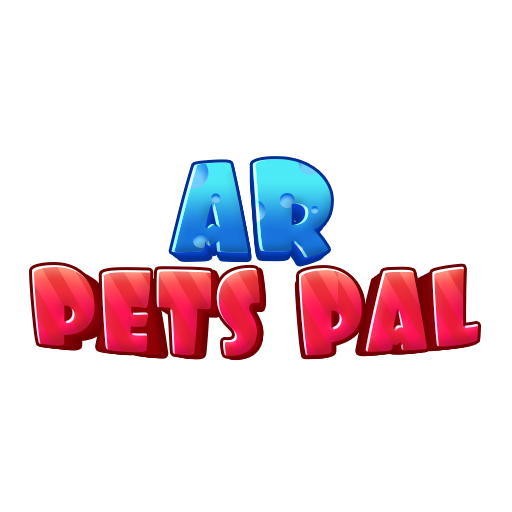
<style>
.page{position:relative;width:512px;height:512px;background:#ffffff}
.page>*{position:absolute;margin:0}
.t1{font:125px "Foo-Regular";letter-spacing:-0.01em}
.t2{font:122.5px "Foo-Regular";letter-spacing:-0.01em}
.t3{font:120.1px "Foo-Regular";letter-spacing:-0.01em}
.t4{font:113px "Foo-Regular";letter-spacing:-0.01em}
.t5{font:110.7px "Foo-Regular";letter-spacing:-0.01em}
.t6{font:134.8px "Foo-Regular";letter-spacing:-0.005em;scale:0.91 1}
.t7{font:137.5px "Foo-Regular";letter-spacing:-0.005em;scale:0.91 1}
.t8{font:132.1px "Foo-Regular";letter-spacing:-0.005em;scale:0.91 1}
.t9{font:129.4px "Foo-Regular";letter-spacing:-0.005em;scale:0.91 1}
.t10{font:126.8px "Foo-Regular";letter-spacing:-0.005em;scale:0.91 1}
.t11{font:124.3px "Foo-Regular";letter-spacing:-0.005em;scale:0.91 1}
</style>
<div class="page">
<p class="t1" style="left:171px;top:159px;width:160px;height:99px">AR</p>
<p class="t2" style="left:173px;top:162px;width:157px;height:97px">AR</p>
<p class="t3" style="left:174px;top:164px;width:154px;height:96px">AR</p>
<p class="t4" style="left:179px;top:173px;width:145px;height:90px">AR</p>
<p class="t5" style="left:180px;top:176px;width:142px;height:88px">AR</p>
<p class="t6" style="left:32px;top:267px;width:446px;height:90px">pats pal</p>
<p class="t7" style="left:32px;top:265px;width:447px;height:91px">pets pal</p>
<p class="t8" style="left:37px;top:269px;width:436px;height:88px">pats pal</p>
<p class="t9" style="left:41px;top:270px;width:428px;height:87px">pats pal</p>
<p class="t10" style="left:45px;top:272px;width:419px;height:85px">pats pal</p>
<p class="t11" style="left:50px;top:274px;width:410px;height:84px">pats pal</p>
</div>
